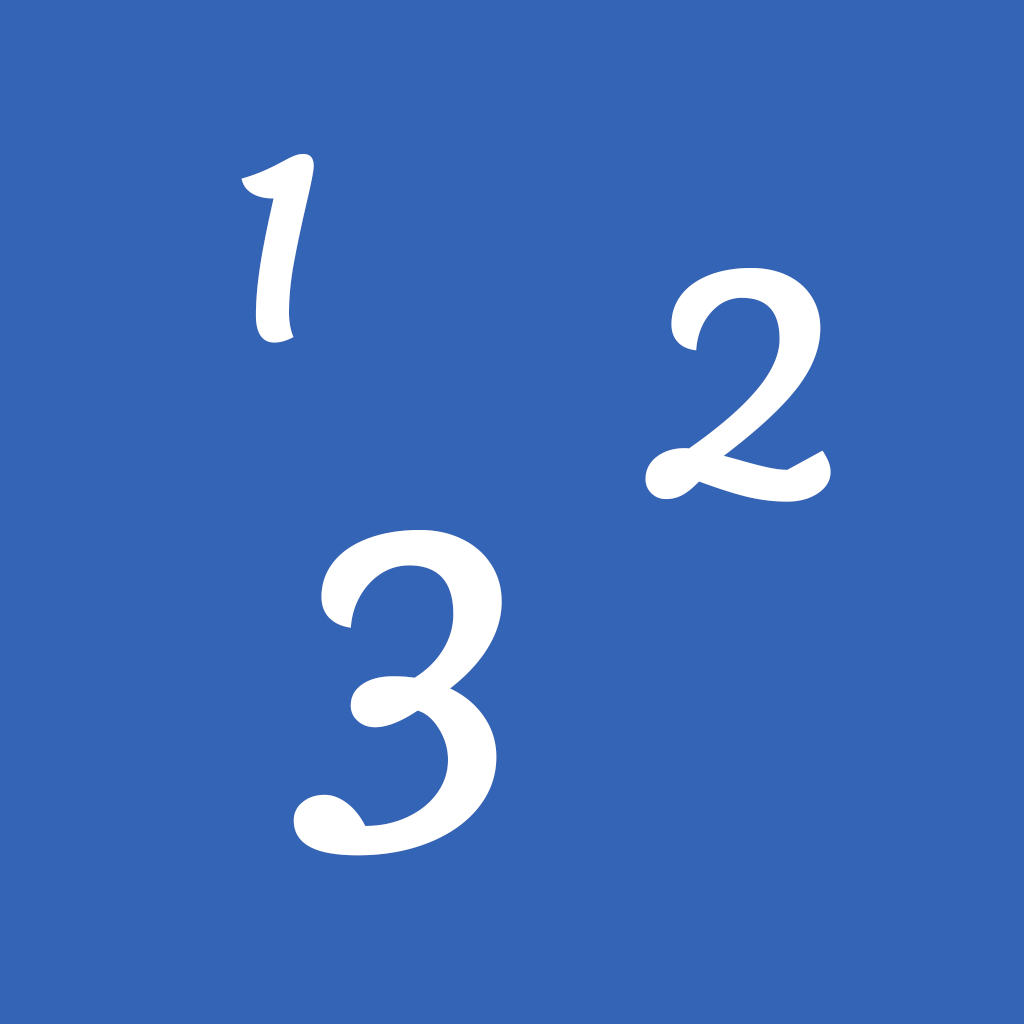
<style>
.page{position:relative;width:1024px;height:1024px;background:#3364b5}
.page>*{position:absolute;margin:0}
.t1{font:260px "Lemonada-Regular";color:#ffffff}
.t2{font:320px "Lemonada-Regular";color:#ffffff}
.t3{font:380px "Lemonada-Regular";color:#ffffff}
</style>
<div class="page">
<p class="t1" style="left:241px;top:154px;width:73px;height:189px">1</p>
<p class="t2" style="left:645px;top:268px;width:186px;height:234px">2</p>
<p class="t3" style="left:293px;top:530px;width:209px;height:326px">3</p>
</div>
